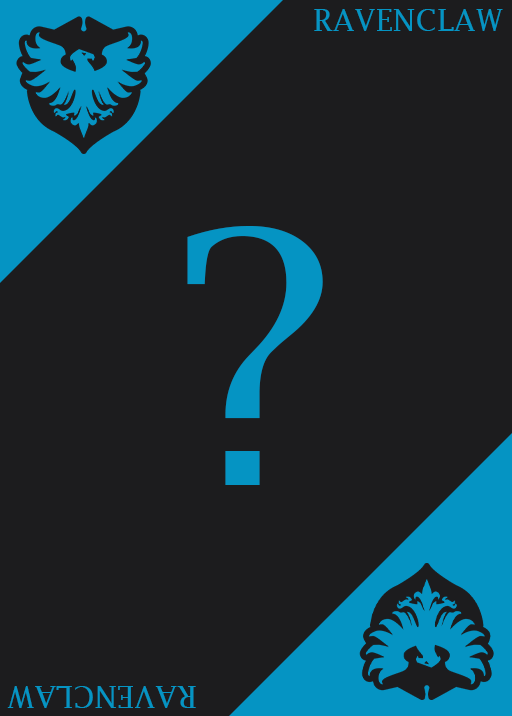
<style>
.page{position:relative;width:512px;height:716px;background:#1c1c1e}
.page>*{position:absolute;margin:0}
.t1{font:30px "LucidaFax";color:#0594c3}
.t2{font:350px "LucidaBright";color:#0594c3}
</style>
<div class="page">
<p class="t1" style="left:314px;top:9px;width:189px;height:22px">RAVENCLAW</p>
<p class="t2" style="left:187px;top:226px;width:136px;height:259px">?</p>
<p class="t1" style="left:7px;top:686px;width:189px;height:22px;rotate:180deg">RAVENCLAW</p>
</div>
